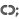
<style>
.page{position:relative;width:19px;height:19px;background:#ffffff}
.page>*{position:absolute;margin:0}
.t1{font:14.8px "PicoBlackAl";color:#616161}
</style>
<div class="page">
<p class="t1" style="left:0px;top:5px;width:19px;height:12px">();</p>
</div>
